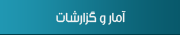
<style>
.page{position:relative;width:180px;height:35px}
.page>*{position:absolute;margin:0}
.t1{font:14px "Mj_Flow";letter-spacing:-0.001em;color:#f1f2f2}
</style>
<div class="page">
<p class="t1" style="left:56px;top:10px;width:70px;height:15px">آمار و گزارشات</p>
</div>
